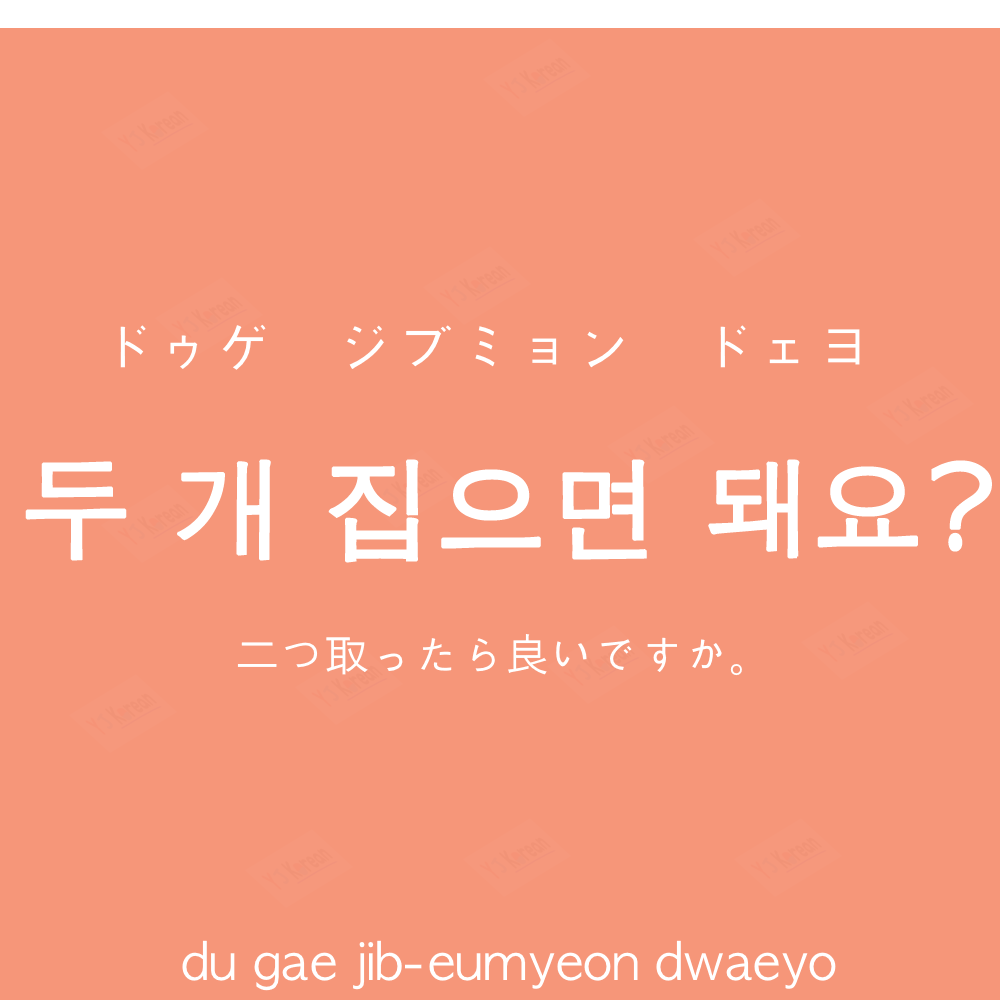
<style>
.page{position:relative;width:1000px;height:1000px;background:#f69679}
.page>*{position:absolute;margin:0}
.t1{font:60px "AppleGothic";color:#ffffff}
.t2{font:110px "AppleGothic";color:#ffffff;font-weight:bold}
.t3{font:45px "AppleGothic";color:#ffffff}
.t4{font:50px "AppleGothic";color:#ffffff}
</style>
<div class="page">
<p class="t1" style="left:120px;top:324px;width:740px;height:46px">ドゥゲ　ジブミョン　ドェヨ</p>
<p class="t2" style="left:25px;top:459px;width:967px;height:104px">두 개 집으면 돼요?</p>
<p class="t3" style="left:237px;top:634px;width:505px;height:42px">二つ取ったら良いですか。</p>
<p class="t4" style="left:182px;top:940px;width:654px;height:51px">du gae jib-eumyeon dwaeyo</p>
</div>
